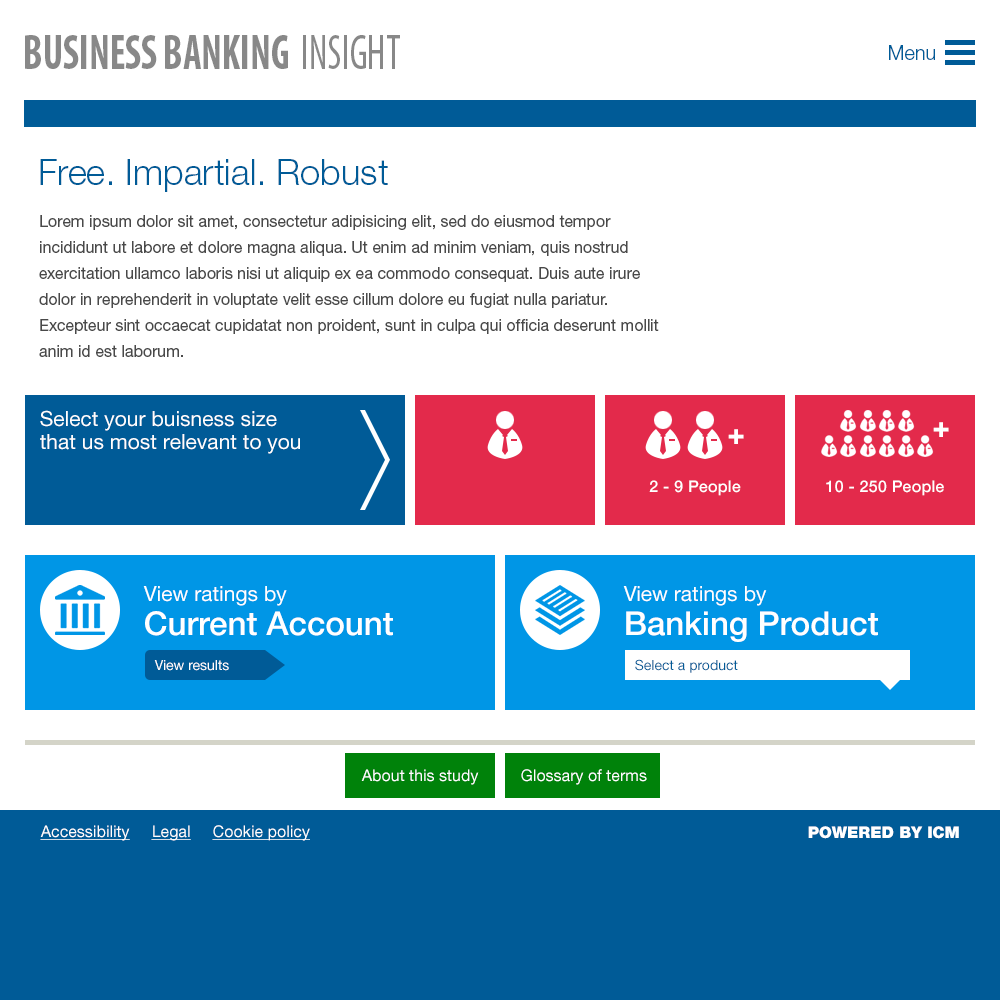
<style>
.page{position:relative;width:1000px;height:1000px;background:#ffffff}
.page>*{position:absolute;margin:0}
.t1{font:49px "MyriadPro-BoldCond";color:#888888;text-transform:uppercase;scale:0.82 1}
.t2{font:49px "MyriadPro-Cond";color:#888888;text-transform:uppercase;scale:0.82 1}
.t3{font:20px "HelveticaNeue-Light";color:#005b97}
.t4{font:36px "HelveticaNeue-Light";color:#005b97}
.t5{font:16px/26px "HelveticaNeueCE-Roman";color:#494949}
.t6{font:21px/23px "HelveticaNeueCE-Roman";color:#ffffff}
.t7{font:30px "Arial-BoldMT";letter-spacing:0.015em;color:#ffffff;text-transform:uppercase}
.t8{font:16px "HelveticaNeue-Medium";letter-spacing:0.015em;color:#ffffff}
.t9{font:21px "HelveticaNeueCE-Roman";color:#ffffff}
.t10{font:21px "HelveticaNeue-Roman";color:#ffffff}
.t11{font:33px "HelveticaNeue-Medium";color:#ffffff}
.t12{font:14px "HelveticaNeue-Roman";color:#ffffff}
.t13{font:14px "HelveticaNeue-Roman";color:#005b97}
.t14{font:16px "HelveticaNeue-Roman";color:#ffffff}
.t15{font:16px "HelveticaNeue-Roman";color:#ffffff;text-decoration:underline}
.t16{font:16px "HelveticaNeue-Black";color:#ffffff;text-transform:uppercase}
</style>
<div class="page">
<p class="t1" style="left:25px;top:35px;width:263px;height:34px">Business Banking</p>
<p class="t2" style="left:303px;top:35px;width:97px;height:34px">INSIGHT</p>
<p class="t3" style="left:889px;top:45px;width:46px;height:15px">Menu</p>
<p class="t4" style="left:40px;top:159px;width:348px;height:33px">Free. Impartial. Robust</p>
<p class="t5" style="left:39px;top:215px;width:620px;height:142px">Lorem ipsum dolor sit amet, consectetur adipisicing elit, sed do eiusmod tempor incididunt ut labore et dolore magna aliqua. Ut enim ad minim veniam, quis nostrud exercitation ullamco laboris nisi ut aliquip ex ea commodo consequat. Duis aute irure dolor in reprehenderit in voluptate velit esse cillum dolore eu fugiat nulla pariatur. Excepteur sint occaecat cupidatat non proident, sunt in culpa qui officia deserunt mollit anim id est laborum.</p>
<p class="t6" style="left:40px;top:410px;width:260px;height:44px">Select your buisness size<br>that us most relevant to you</p>
<p class="t7" style="left:933px;top:422px;width:16px;height:15px">+</p>
<p class="t7" style="left:728px;top:429px;width:16px;height:15px">+</p>
<p class="t8" style="left:649px;top:480px;width:92px;height:16px">2 - 9 People</p>
<p class="t8" style="left:826px;top:480px;width:118px;height:16px">10 - 250 People</p>
<p class="t9" style="left:143px;top:586px;width:144px;height:20px">View ratings by</p>
<p class="t10" style="left:623px;top:586px;width:144px;height:20px">View ratings by</p>
<p class="t11" style="left:145px;top:611px;width:248px;height:25px">Current Account</p>
<p class="t11" style="left:626px;top:611px;width:252px;height:31px">Banking Product</p>
<p class="t12" style="left:154px;top:660px;width:75px;height:11px">View results</p>
<p class="t13" style="left:635px;top:659px;width:103px;height:14px">Select a product</p>
<p class="t14" style="left:361px;top:769px;width:118px;height:16px">About this study</p>
<p class="t14" style="left:521px;top:769px;width:126px;height:16px">Glossary of terms</p>
<p class="t15" style="left:40px;top:825px;width:90px;height:16px">Accessibility</p>
<p class="t15" style="left:151px;top:825px;width:40px;height:16px">Legal</p>
<p class="t15" style="left:212px;top:825px;width:98px;height:16px">Cookie policy</p>
<p class="t16" style="left:808px;top:826px;width:151px;height:13px">Powered by icm</p>
</div>
